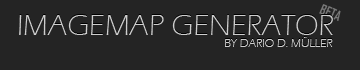
<style>
.page{position:relative;width:360px;height:70px;background:#242424}
.page>*{position:absolute;margin:0}
.t1{font:13px "AgencyFB-Bold";color:#797979;text-transform:uppercase}
.t2{font:30px "ErasITC-Light";color:#cecece;text-transform:uppercase}
.t3{font:12px "ErasITC-Light";color:#cecece;text-transform:uppercase}
</style>
<div class="page">
<p class="t1" style="left:319px;top:4px;width:22px;height:17px;rotate:23deg">BETA</p>
<p class="t2" style="left:19px;top:15px;width:314px;height:20px">Imagemap GeNerator</p>
<p class="t3" style="left:225px;top:37px;width:108px;height:10px">by Dario D. Müller</p>
</div>
